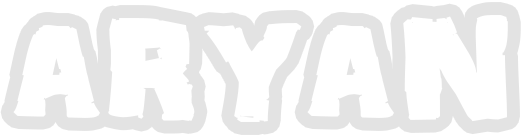
<style>
.page{position:relative;width:521px;height:137px;background:#ffffff}
.page>*{position:absolute;margin:0}
.t1{font:140px "ARDARLING";color:#ffffff;font-weight:bold}
</style>
<div class="page">
<p class="t1" style="left:13px;top:15px;width:495px;height:107px">ARYAN</p>
</div>
